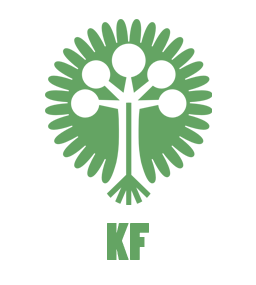
<style>
.page{position:relative;width:256px;height:285px;background:#ffffff}
.page>*{position:absolute;margin:0}
.t1{font:49.8px "PoplarStd";color:#64a463}
</style>
<div class="page">
<p class="t1" style="left:107px;top:223px;width:42px;height:37px">KF</p>
</div>
